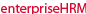
<style>
.page{position:relative;width:86px;height:14px;background:#ffffff}
.page>*{position:absolute;margin:0}
.t1{font:14px "MyriadPro-Regular";color:#d60935}
</style>
<div class="page">
<p class="t1" style="left:1px;top:3px;width:86px;height:13px">enterpriseHRM</p>
</div>
